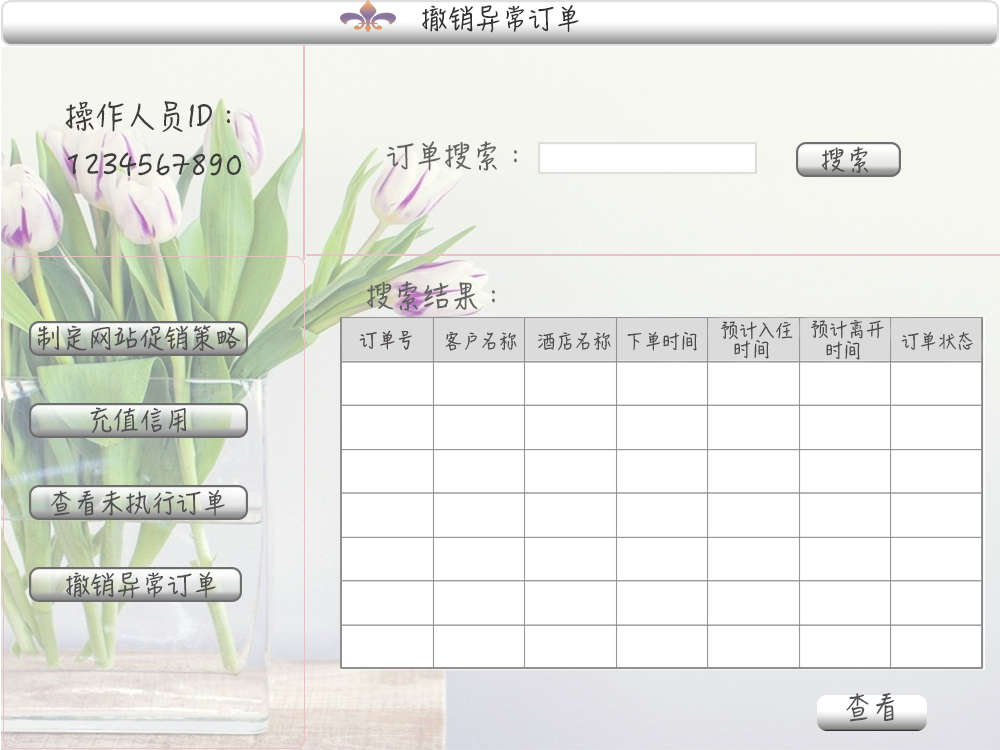
<style>
.page{position:relative;width:1000px;height:750px;background:#ffffff}
.page>*{position:absolute;margin:0}
.t1{font:26px "HanziPenSC-W5";letter-spacing:-0.005em;color:#333030;text-transform:uppercase}
.t2{font:30px/6px "HanziPenSC-W5";letter-spacing:-0.005em;color:#3d3d3c;text-transform:uppercase}
.t3{font:28px "HanziPenSC-W5";letter-spacing:-0.005em;color:#636363;text-transform:uppercase}
.t4{font:18px "HanziPenSC-W5";letter-spacing:-0.005em;color:#4d4949;text-transform:uppercase}
.t5{font:28px "HanziPenSC-W5";letter-spacing:-0.005em;color:#555252;text-transform:uppercase}
</style>
<div class="page">
<p class="t1" style="left:422px;top:5px;width:157px;height:28px">撤销异常订单</p>
<p class="t2" style="left:65px;top:101px;width:176px;height:76px;text-align:center">操作人员ID：<br><br><br><br><br><br><br><br>1234567890</p>
<p class="t3" style="left:387px;top:141px;width:130px;height:30px">订单搜索：</p>
<p class="t3" style="left:367px;top:281px;width:128px;height:30px">搜索结果：</p>
<p class="t4" style="left:721px;top:321px;width:72px;height:19px">预计入住</p>
<p class="t4" style="left:811px;top:320px;width:73px;height:19px">预计离开</p>
<p class="t4" style="left:445px;top:331px;width:72px;height:20px">客户名称</p>
<p class="t4" style="left:538px;top:332px;width:73px;height:19px">酒店名称</p>
<p class="t4" style="left:627px;top:331px;width:70px;height:20px">下单时间</p>
<p class="t4" style="left:734px;top:340px;width:35px;height:19px">时间</p>
<p class="t4" style="left:826px;top:341px;width:34px;height:19px">时间</p>
<p class="t4" style="left:901px;top:331px;width:72px;height:20px">订单状态</p>
<p class="t5" style="left:846px;top:693px;width:48px;height:29px">查看</p>
</div>
